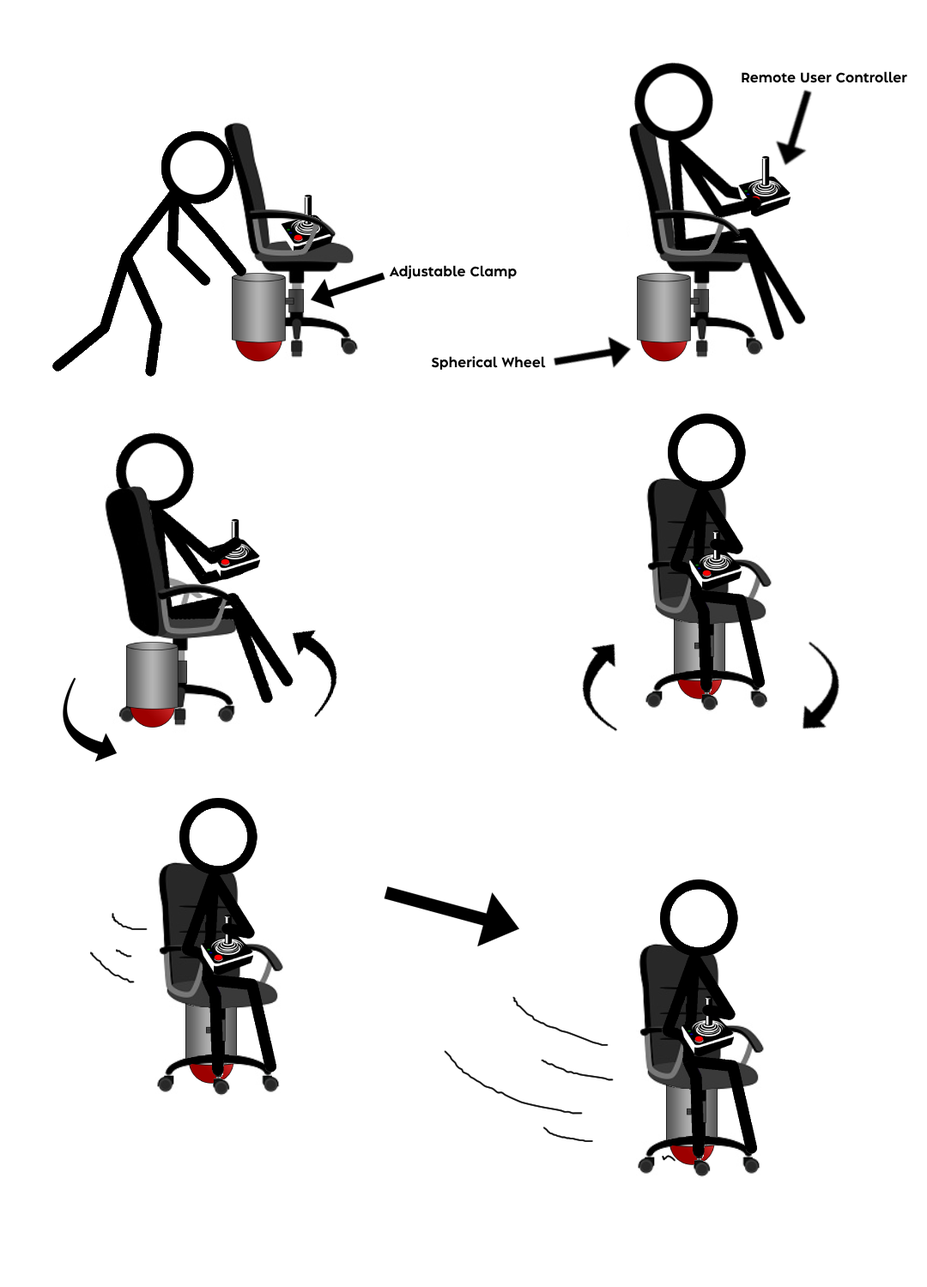
<style>
.page{position:relative;width:927px;height:1287px;background:#ffffff}
.page>*{position:absolute;margin:0}
.t1{font:12.9px "AlbulaPro-Bold";color:#000000}
</style>
<div class="page">
<p class="t1" style="left:741px;top:71px;width:166px;height:12px">Remote User Controller</p>
<p class="t1" style="left:389px;top:265px;width:127px;height:14px">Adjustable Clamp</p>
<p class="t1" style="left:431px;top:356px;width:115px;height:14px">Spherical Wheel</p>
</div>
